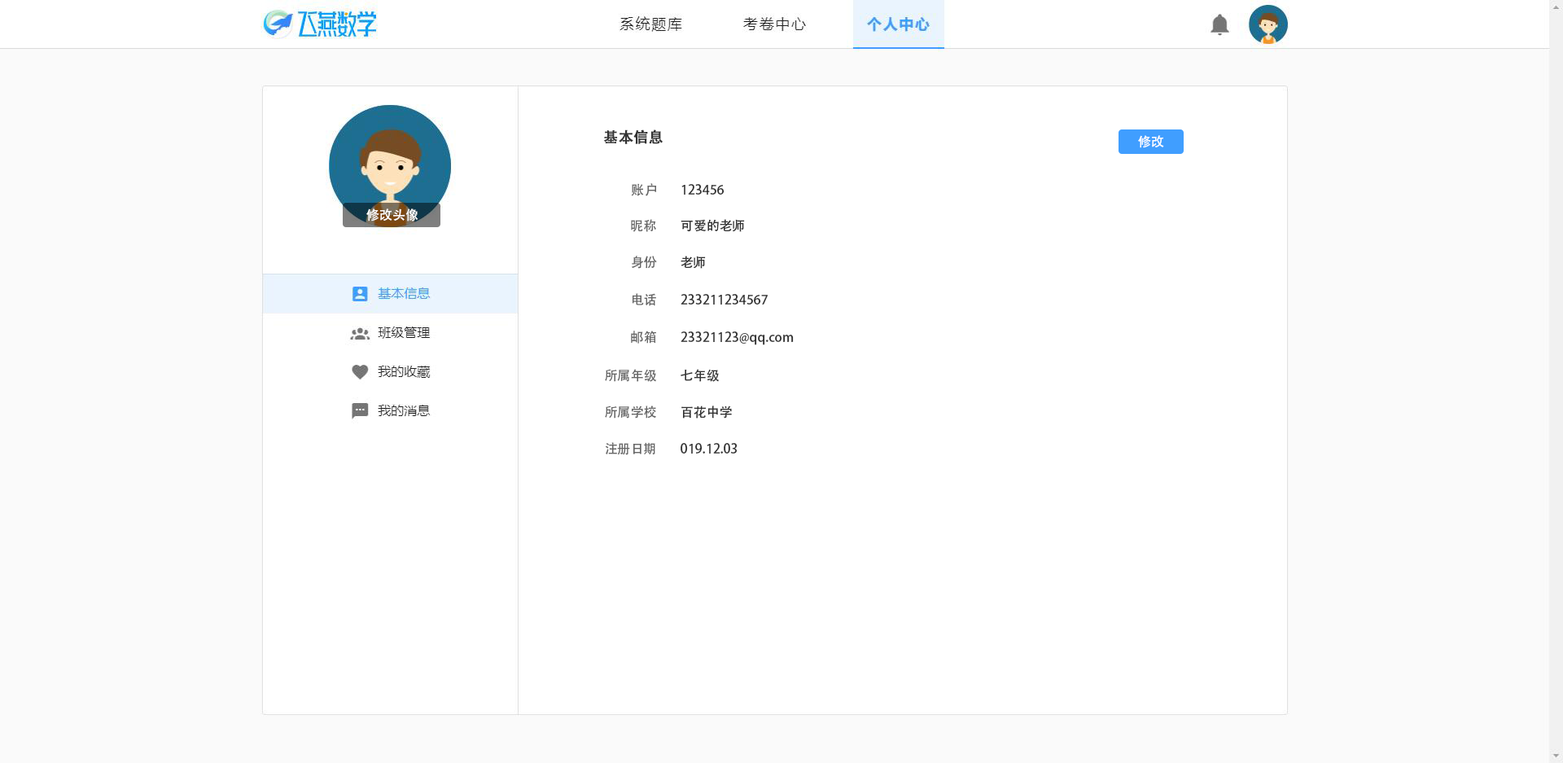
<style>
.page{position:relative;width:1563px;height:763px;background:#ffffff}
.page>*{position:absolute;margin:0}
.t1{font:14.7px "AdobeHeitiStd-Regular";color:#333333;font-weight:bold}
.t2{font:13px "AdobeHeitiStd-Regular";color:#ffffff}
.t3{font:13px "AdobeHeitiStd-Regular";color:#666666}
.t4{font:13px "AdobeHeitiStd-Regular";color:#333333}
</style>
<div class="page">
<p class="t1" style="left:603px;top:129px;width:60px;height:15px">基本信息</p>
<p class="t2" style="left:1138px;top:135px;width:26px;height:13px">修改</p>
<p class="t3" style="left:631px;top:183px;width:26px;height:13px">账户</p>
<p class="t4" style="left:681px;top:184px;width:44px;height:11px">123456</p>
<p class="t2" style="left:366px;top:208px;width:52px;height:13px">修改头像</p>
<p class="t3" style="left:631px;top:219px;width:25px;height:13px">昵称</p>
<p class="t4" style="left:681px;top:219px;width:64px;height:13px">可爱的老师</p>
<p class="t3" style="left:632px;top:256px;width:25px;height:13px">身份</p>
<p class="t4" style="left:681px;top:256px;width:25px;height:13px">老师</p>
<p class="t3" style="left:632px;top:293px;width:24px;height:13px">电话</p>
<p class="t4" style="left:681px;top:294px;width:87px;height:10px">233211234567</p>
<p class="t3" style="left:631px;top:331px;width:25px;height:13px">邮箱</p>
<p class="t4" style="left:681px;top:331px;width:113px;height:14px">23321123@qq.com</p>
<p class="t3" style="left:605px;top:369px;width:52px;height:13px">所属年级</p>
<p class="t4" style="left:681px;top:369px;width:39px;height:13px">七年级</p>
<p class="t3" style="left:605px;top:405px;width:51px;height:13px">所属学校</p>
<p class="t4" style="left:681px;top:405px;width:51px;height:13px">百花中学</p>
<p class="t3" style="left:605px;top:442px;width:50px;height:13px">注册日期</p>
<p class="t4" style="left:681px;top:443px;width:57px;height:10px">019.12.03</p>
</div>
